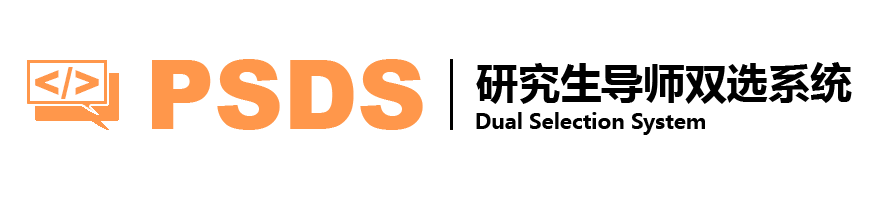
<style>
.page{position:relative;width:889px;height:203px;background:#ffffff}
.page>*{position:absolute;margin:0}
.t1{font:95.7px "Arial-Black";color:#ff974b}
.t2{font:41.7px "MicrosoftYaHei-Bold";color:#000000}
.t3{font:42.3px "Arial-Black";color:#ff974b}
.t4{font:20.8px "MicrosoftYaHei-Bold";color:#000000}
</style>
<div class="page">
<p class="t1" style="left:152px;top:59px;width:271px;height:71px">PSDS</p>
<p class="t2" style="left:476px;top:62px;width:376px;height:42px">研究生导师双选系统</p>
<p class="t3" style="left:35px;top:67px;width:64px;height:32px">&lt;/&gt;</p>
<p class="t4" style="left:476px;top:112px;width:229px;height:23px">Dual Selection System</p>
</div>
